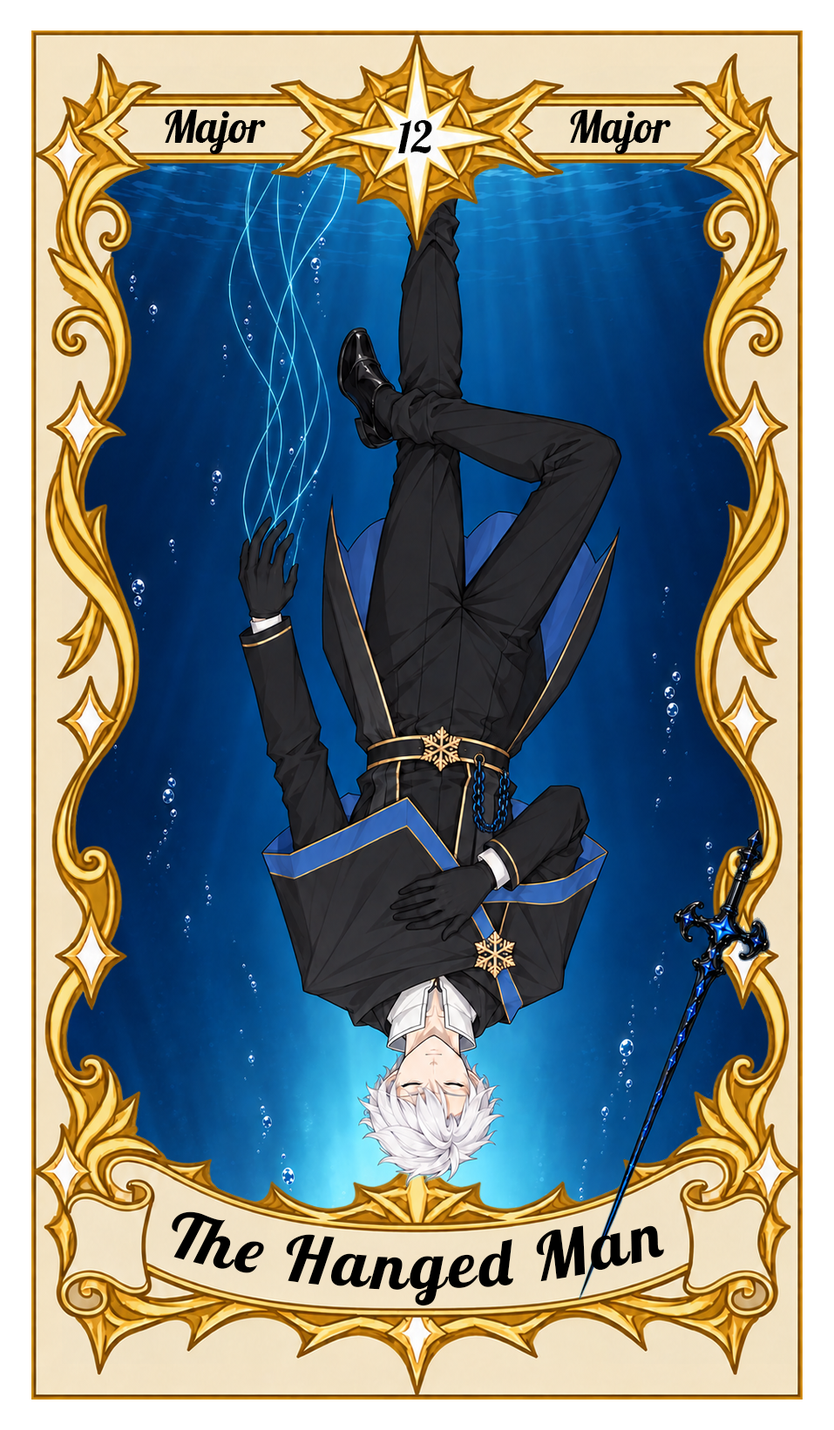
<style>
.page{position:relative;width:834px;height:1430px}
.page>*{position:absolute;margin:0}
.t1{font:43.6px "Lobster-Regular";color:#000000}
.t2{font:65.3px "Lobster-Regular";letter-spacing:0.05em;color:#000000}
</style>
<div class="page">
<p class="t1" style="left:165px;top:110px;width:101px;height:44px">Major</p>
<p class="t1" style="left:570px;top:110px;width:101px;height:44px">Major</p>
<p class="t1" style="left:398px;top:120px;width:34px;height:33px">12</p>
<p class="t2" style="left:172px;top:1212px;width:492px;height:95px">The Hanged Man</p>
</div>
